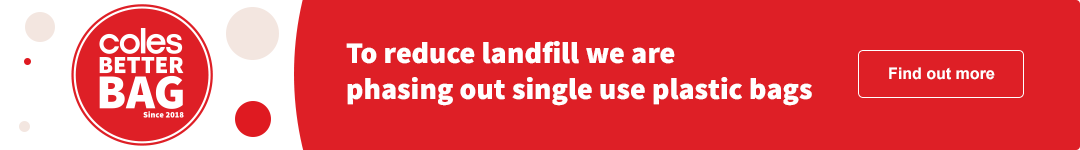
<style>
.page{position:relative;width:1080px;height:150px;background:#de1f26}
.page>*{position:absolute;margin:0}
.t1{font:30px "SourceSansPro-Black";color:#ffffff}
.t2{font:16px "Arial-BoldMT";color:#ffffff}
</style>
<div class="page">
<p class="t1" style="left:346px;top:41px;width:466px;height:65px">To reduce landfill we are<br>phasing out single use plastic bags</p>
<p class="t2" style="left:889px;top:67px;width:106px;height:13px">Find out more</p>
</div>
